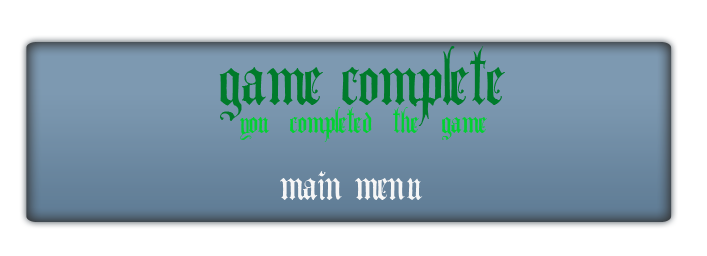
<style>
.page{position:relative;width:707px;height:256px;background:#ffffff}
.page>*{position:absolute;margin:0}
.t1{font:100px "AngloText";color:#007b2b}
.t2{font:44px "AngloText";color:#02d132}
.t3{font:60px "AngloText";color:#f6f6f6}
</style>
<div class="page">
<p class="t1" style="left:219px;top:46px;width:286px;height:80px">game complete</p>
<p class="t2" style="left:240px;top:107px;width:247px;height:35px">you completed the game</p>
<p class="t3" style="left:280px;top:171px;width:143px;height:29px">main menu</p>
</div>
